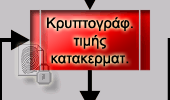
<style>
.page{position:relative;width:170px;height:100px;background:#c6c3c6}
.page>*{position:absolute;margin:0}
.t1{font:14.7px "ArialMT";color:#000000}
</style>
<div class="page">
<p class="t1" style="left:47px;top:17px;width:86px;height:50px;text-align:center">Κρυπτογράφ.<br>τιμής<br>κατακερματ.</p>
</div>
